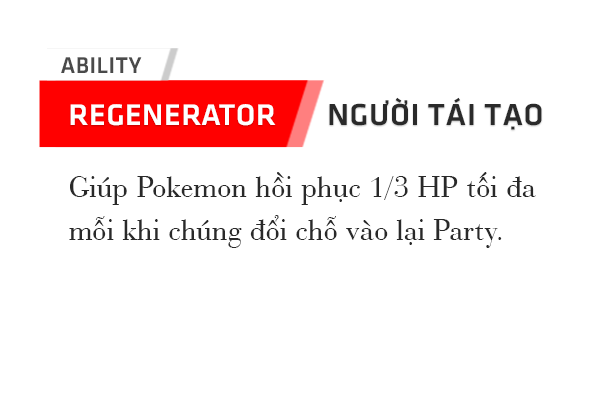
<style>
.page{position:relative;width:600px;height:400px;background:#ffffff}
.page>*{position:absolute;margin:0}
.t1{font:23.6px "UTM-Facebook-K&T";letter-spacing:0.02em;color:#4a4a4a}
.t2{font:31.5px "UTM-Facebook-K&T";letter-spacing:0.02em;color:#2a2a2a}
.t3{font:30.9px "UTM-Facebook-K&T";letter-spacing:0.02em;color:#ffffff}
.t4{font:30.9px/43.3px "UVNBachDang";letter-spacing:0.02em;color:#292929}
</style>
<div class="page">
<p class="t1" style="left:61px;top:57px;width:81px;height:16px">ABILITY</p>
<p class="t2" style="left:329px;top:97px;width:213px;height:33px">NGƯỜI TÁI TẠO</p>
<p class="t3" style="left:70px;top:104px;width:206px;height:22px">REGENERATOR</p>
<p class="t4" style="left:69px;top:172px;width:467px;height:76px;text-align:justify">Giúp Pokemon hồi phục 1/3 HP tối đa mỗi khi chúng đổi chỗ vào lại Party.</p>
</div>
